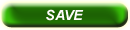
<style>
.page{position:relative;width:130px;height:30px}
.page>*{position:absolute;margin:0}
.t1{font:14px "Arial-BoldItalicMT";color:#fcfbf9}
</style>
<div class="page">
<p class="t1" style="left:46px;top:9px;width:38px;height:12px">SAVE</p>
</div>
